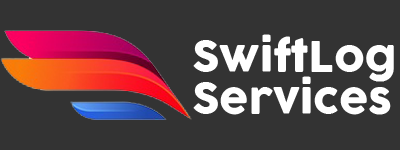
<style>
.page{position:relative;width:400px;height:150px;background:#333333}
.page>*{position:absolute;margin:0}
.t1{font:41.9px/41.9px "Cocogoose";color:#ffffff}
</style>
<div class="page">
<p class="t1" style="left:193px;top:34px;width:201px;height:81px">SwiftLog<br>Services</p>
</div>
